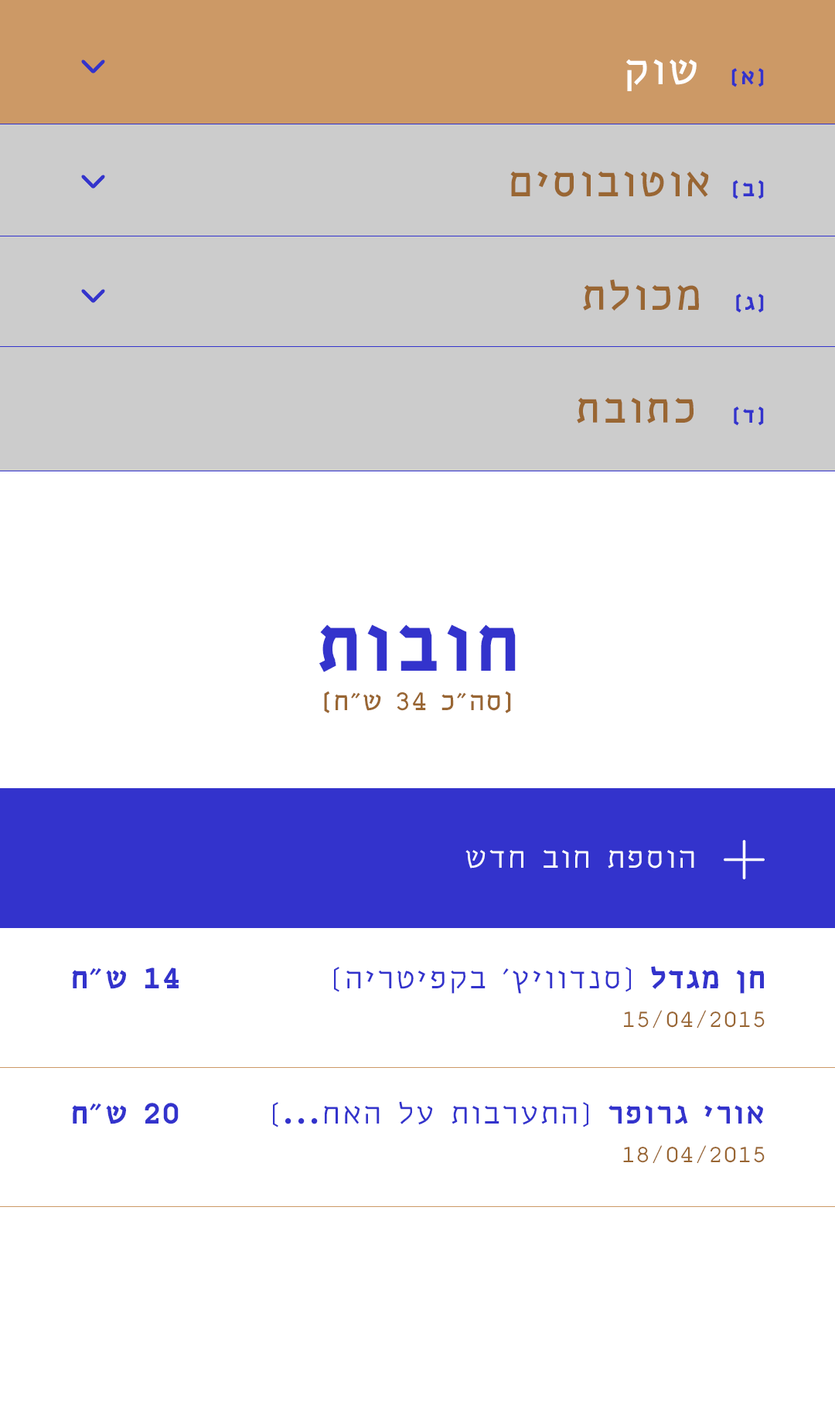
<style>
.page{position:relative;width:835px;height:1428px;background:#ffffff}
.page>*{position:absolute;margin:0}
.t1{font:42.5px "MaccabiBlock";letter-spacing:0.04em;color:#ffffff}
.t2{font:23.2px "MaccabiBlock-Black";letter-spacing:0.04em;color:#3333cc}
.t3{font:42.5px "MaccabiBlock";letter-spacing:0.04em;color:#996633}
.t4{font:77.3px "MaccabiBlock-Black";letter-spacing:0.04em;color:#3333cc}
.t5{font:27.1px "MaccabiBlock";letter-spacing:0.04em;color:#996633}
.t6{font:30.9px "MaccabiBlock-Light";letter-spacing:0.04em;color:#ffffff}
.t7{font:30.9px "MaccabiBlock-Black";letter-spacing:0.04em;color:#3333cc}
.t8{font:30.9px/51px "MaccabiBlock-Light";letter-spacing:0.04em;color:#3333cc}
.t9{font:30.9px/51px "MaccabiBlock-Black";letter-spacing:0.04em;color:#3333cc}
.t10{font:23.2px/38.6px "MaccabiBlock-Light";letter-spacing:0.04em;color:#996633}
.t11{font:30.9px/51px "MaccabiBlock-Bold";letter-spacing:0.04em;color:#3333cc}
</style>
<div class="page">
<p class="t1" style="left:626px;top:59px;width:138px;height:32px">קוש  <span class="t2">[א]</span></p>
<p class="t3" style="left:510px;top:171px;width:254px;height:28px">םיסובוטוא  <span class="t2">[ב]</span></p>
<p class="t3" style="left:583px;top:279px;width:181px;height:34px">תלוכמ  <span class="t2">[ג]</span></p>
<p class="t3" style="left:577px;top:397px;width:187px;height:29px">תבותכ  <span class="t2">[ד]</span></p>
<p class="t4" style="left:319px;top:625px;width:197px;height:47px">תובוח</p>
<p class="t5" style="left:324px;top:691px;width:187px;height:22px">[ח״ש 34 כ״הס]</p>
<p class="t6" style="left:465px;top:850px;width:229px;height:19px">שדח בוח תפסוה</p>
<p class="t7" style="left:72px;top:968px;width:107px;height:21px">ח״ש 14</p>
<p class="t8" style="left:334px;top:966px;width:430px;height:63px;text-align:right">[הירטיפקב ׳ץיוודנס] <span class="t9">לדגמ ןח<br></span><span class="t10">15/04/2015</span></p>
<p class="t7" style="left:72px;top:1103px;width:107px;height:22px">ח״ש 20</p>
<p class="t8" style="left:273px;top:1101px;width:491px;height:63px;text-align:right">[...חאה לע תוברעתה] <span class="t11">רפורג ירוא<br></span><span class="t10">18/04/2015</span></p>
</div>
